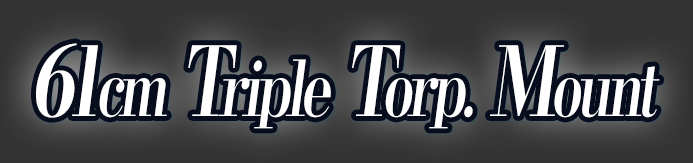
<style>
.page{position:relative;width:693px;height:163px}
.page>*{position:absolute;margin:0}
.t1{font:76.8px "KochoStd-Heavy";letter-spacing:-0.08em;color:#ffffff;font-style:italic;scale:0.74 1}
.t2{font:96px "KochoStd-Heavy";letter-spacing:-0.08em;color:#ffffff;font-style:italic;scale:0.74 1}
</style>
<div class="page">
<p class="t1" style="left:36px;top:43px;width:624px;height:86px"><span class="t2">61</span>cm<span class="t2"> T</span>riple<span class="t2"> T</span>orp.<span class="t2"> M</span>ount</p>
</div>
